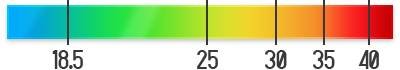
<style>
.page{position:relative;width:400px;height:70px;background:#ffffff}
.page>*{position:absolute;margin:0}
.t1{font:24px "Targa";color:#383838}
</style>
<div class="page">
<p class="t1" style="left:52px;top:50px;width:31px;height:19px">18.5</p>
<p class="t1" style="left:197px;top:50px;width:21px;height:19px">25</p>
<p class="t1" style="left:265px;top:50px;width:22px;height:19px">30</p>
<p class="t1" style="left:313px;top:50px;width:22px;height:19px">35</p>
<p class="t1" style="left:358px;top:50px;width:21px;height:19px">40</p>
</div>
